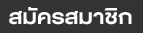
<style>
.page{position:relative;width:143px;height:33px;background:#333333}
.page>*{position:absolute;margin:0}
.t1{font:30.4px "DBHelvethaicaX-BdExt";color:#ffffff}
</style>
<div class="page">
<p class="t1" style="left:9px;top:7px;width:123px;height:18px">สมัครสมาชิก</p>
</div>
